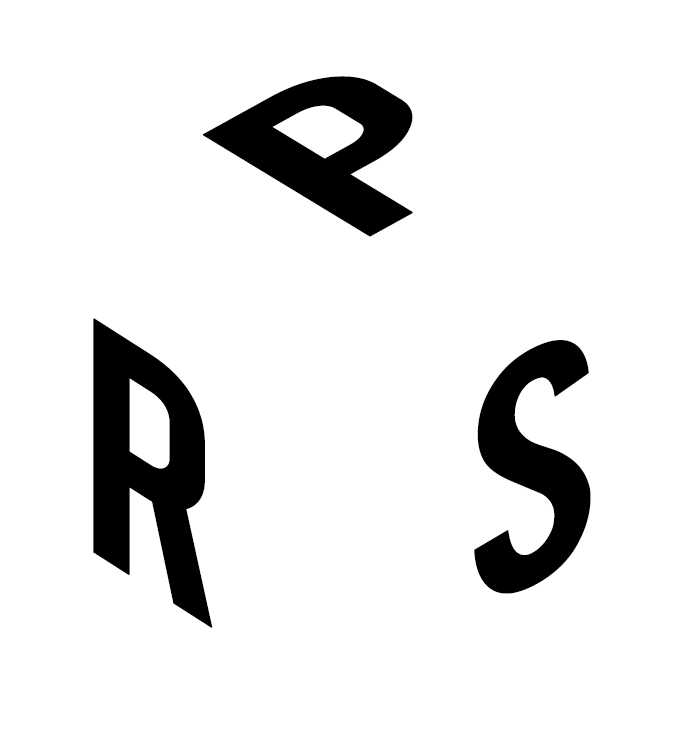
<style>
.page{position:relative;width:679px;height:742px;background:#ffffff}
.page>*{position:absolute;margin:0}
.t1{font:218.9px "Bebas";color:#000000;font-weight:bold;scale:1.65 1}
.t2{font:262.1px "Bebas";color:#000000;font-weight:bold;scale:1.19 1}
.t3{font:259.4px "Bebas";color:#000000;font-weight:bold;scale:1.13 1}
</style>
<div class="page">
<p class="t1" style="left:203px;top:76px;width:210px;height:161px;rotate:-29deg">P</p>
<p class="t2" style="left:93px;top:318px;width:120px;height:310px;rotate:33deg">R</p>
<p class="t3" style="left:474px;top:340px;width:117px;height:254px;rotate:-28deg">S</p>
</div>
